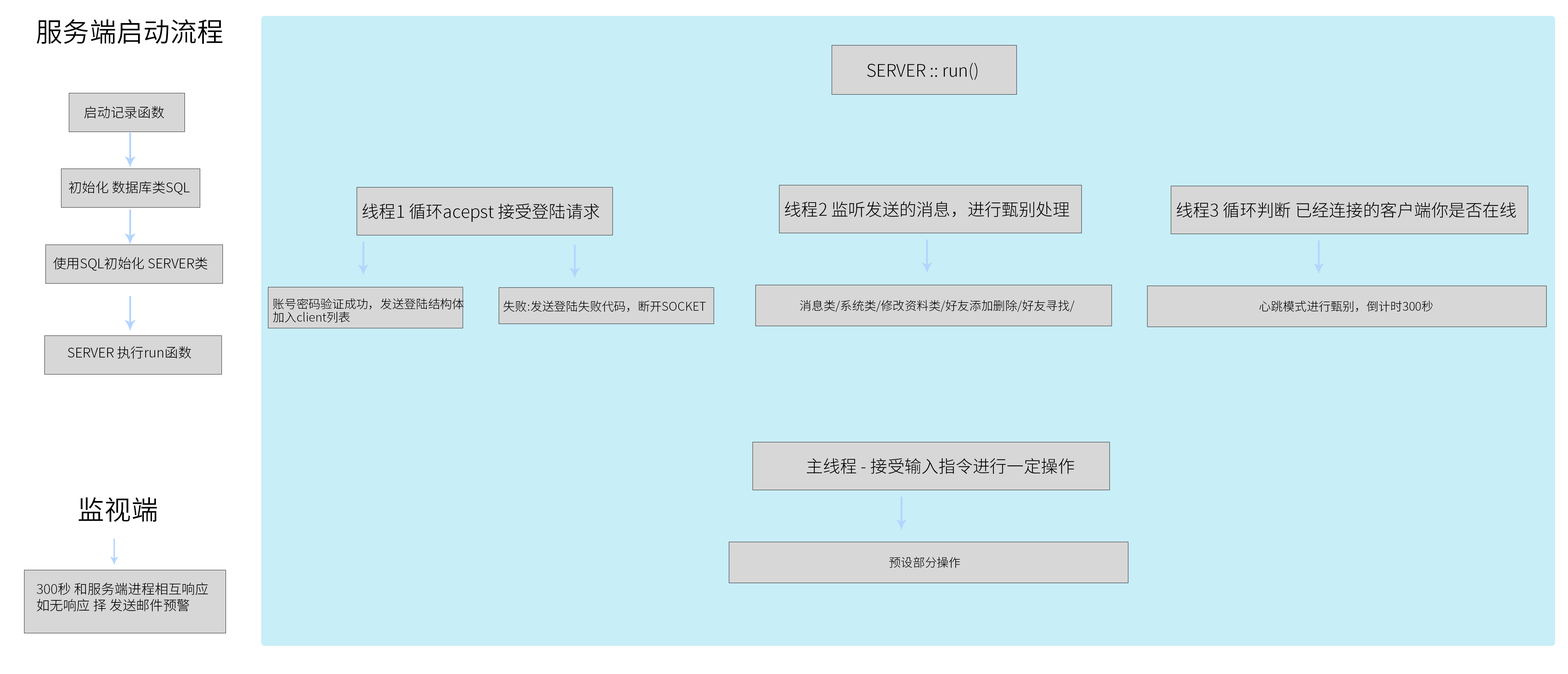
<style>
.page{position:relative;width:1568px;height:674px;background:#c8eef8}
.page>*{position:absolute;margin:0}
.t1{font:26.9px "SourceHanSansCN-Normal";color:#000000}
.t2{font:17px "SourceHanSansCN-Light";color:#000000}
.t3{font:13.4px "SourceHanSansCN-Light";color:#000000}
.t4{font:11.9px/6.6px "SourceHanSansCN-Light";color:#000000}
.t5{font:11.9px "SourceHanSansCN-Light";color:#000000}
</style>
<div class="page">
<p class="t1" style="left:37px;top:19px;width:186px;height:25px">服务端启动流程</p>
<p class="t2" style="left:867px;top:63px;width:110px;height:17px">SERVER :: run()</p>
<p class="t3" style="left:84px;top:106px;width:80px;height:13px">启动记录函数</p>
<p class="t3" style="left:69px;top:181px;width:121px;height:14px">初始化 数据库类SQL</p>
<p class="t2" style="left:362px;top:203px;width:237px;height:19px">线程1 循环acepst 接受登陆请求</p>
<p class="t2" style="left:785px;top:201px;width:284px;height:16px">线程2 监听发送的消息，进行甄别处理</p>
<p class="t2" style="left:1177px;top:202px;width:339px;height:16px">线程3 循环判断 已经连接的客户端你是否在线</p>
<p class="t3" style="left:53px;top:257px;width:154px;height:14px">使用SQL初始化 SERVER类</p>
<p class="t4" style="left:273px;top:298px;width:191px;height:25px">账号密码验证成功，发送登陆结构体<br><br>加入client列表</p>
<p class="t5" style="left:503px;top:301px;width:203px;height:11px">失败:发送登陆失败代码，断开SOCKET</p>
<p class="t5" style="left:800px;top:300px;width:274px;height:12px">消息类/系统类/修改资料类/好友添加删除/好友寻找/</p>
<p class="t5" style="left:1259px;top:301px;width:174px;height:11px">心跳模式进行甄别，倒计时300秒</p>
<p class="t3" style="left:68px;top:346px;width:123px;height:13px">SERVER 执行run函数</p>
<p class="t2" style="left:807px;top:458px;width:267px;height:16px">主线程 - 接受输入指令进行一定操作</p>
<p class="t1" style="left:79px;top:497px;width:78px;height:25px">监视端</p>
<p class="t5" style="left:889px;top:557px;width:71px;height:11px">预设部分操作</p>
<p class="t3" style="left:37px;top:582px;width:171px;height:30px">300秒 和服务端进程相互响应<br>如无响应 择 发送邮件预警</p>
</div>
